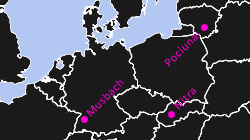
<style>
.page{position:relative;width:250px;height:140px;background:#1a1a1a}
.page>*{position:absolute;margin:0}
.t1{font:12px "Calibri";letter-spacing:0.05em;color:#ff00d2}
.t2{font:12px "Calibri";letter-spacing:0.05em}
</style>
<div class="page">
<p class="t1" style="left:164px;top:30px;width:37px;height:37px;rotate:-45deg">Pociunai</p>
<p class="t2" style="left:86px;top:80px;width:38px;height:37px;rotate:-45deg">Musbach</p>
<p class="t1" style="left:174px;top:88px;width:23px;height:22px;rotate:-45deg">Nitra</p>
</div>
